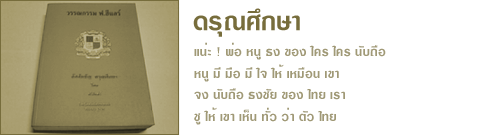
<style>
.page{position:relative;width:500px;height:135px;background:#ffffff}
.page>*{position:absolute;margin:0}
.t1{font:36px "DSELardPhrao";letter-spacing:0.01em;color:#776d3c}
.t2{font:18px "DSELardPhrao";letter-spacing:0.01em;color:#a09976}
</style>
<div class="page">
<p class="t1" style="left:193px;top:8px;width:107px;height:29px">´ÃØ³ÈÖ¡ÉÒ</p>
<p class="t2" style="left:194px;top:42px;width:192px;height:83px">á¹èÐ ! ¾èÍ Ë¹Ù ¸§ ¢Í§ ã¤Ã ã¤Ã ¹Ñº¶×Í<br>Ë¹Ù ÁÕ Á×Í ÁÕ ã¨ ãËé àËÁ×Í¹ à¢Ò<br>¨§ ¹Ñº¶×Í ¸§ªÑÂ ¢Í§ ä·Â àÃÒ<br>ªÙ ãËé à¢Ò àËç¹ ·ÑèÇ ÇèÒ µÑÇ ä·Â</p>
</div>
